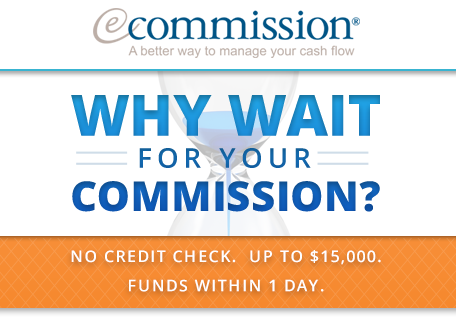
<style>
.page{position:relative;width:456px;height:334px;background:#ffffff}
.page>*{position:absolute;margin:0}
.t1{font:57.1px "OpenSans-Extrabold";color:#1b8ed2;text-transform:uppercase}
.t2{font:27.3px "OpenSans-Semibold";letter-spacing:0.2em;color:#1263a6;text-transform:uppercase}
.t3{font:41.3px "OpenSans-Extrabold";color:#0f5ab1;text-transform:uppercase}
.t4{font:16px/29.3px "OpenSans-Semibold";letter-spacing:0.1em;color:#ffffff;text-transform:uppercase}
</style>
<div class="page">
<p class="t1" style="left:71px;top:95px;width:309px;height:41px">Why Wait</p>
<p class="t2" style="left:139px;top:148px;width:172px;height:20px">For Your</p>
<p class="t3" style="left:72px;top:181px;width:308px;height:31px">Commission?</p>
<p class="t4" style="left:71px;top:250px;width:310px;height:42px;text-align:center">No credit check.  up to $15,000.<br>Funds within 1 day.</p>
</div>
